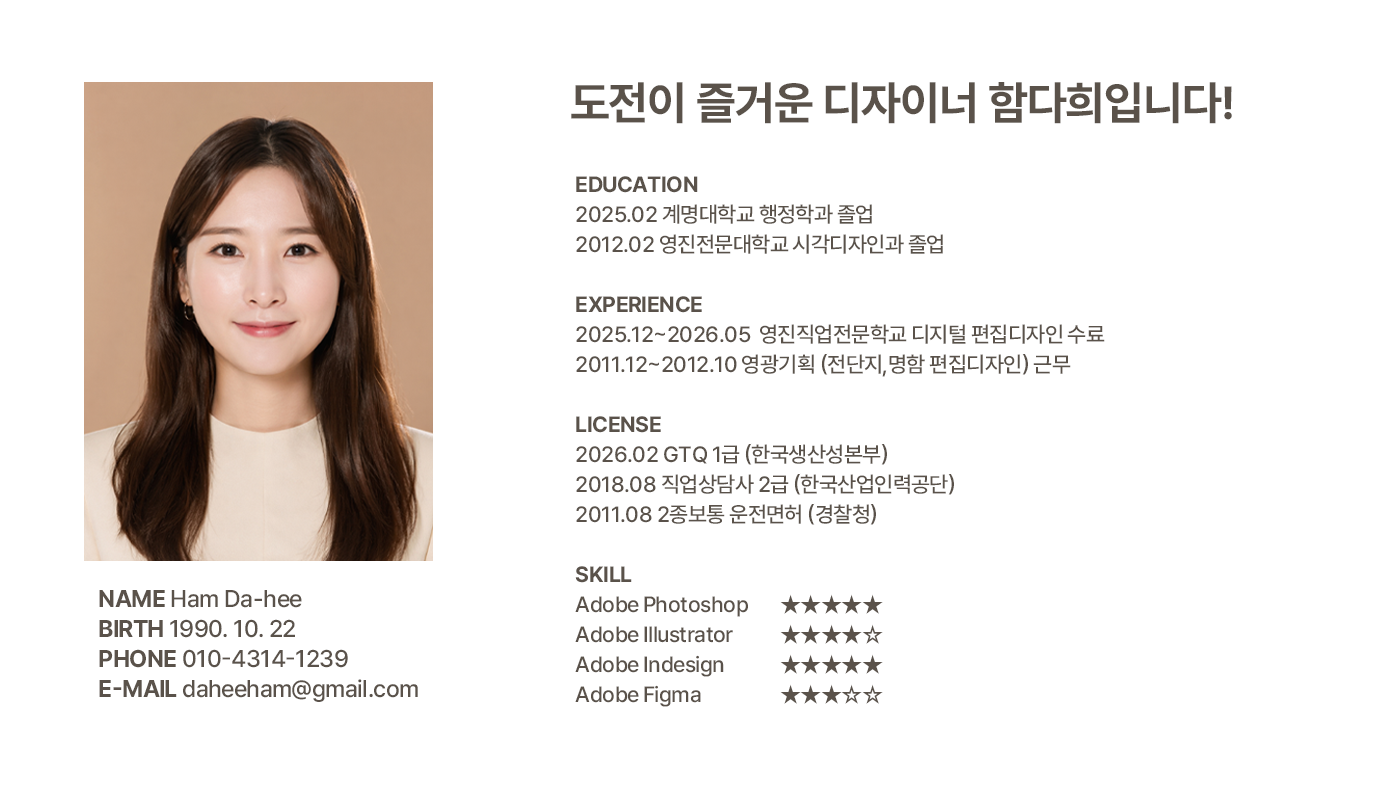
<style>
.page{position:relative;width:1400px;height:788px;background:#ffffff}
.page>*{position:absolute;margin:0}
.t1{font:46px "Pretendard-Bold";letter-spacing:-0.025em;color:#5a524a}
.t2{font:22px/30px "Pretendard-Medium";letter-spacing:-0.025em;color:#5a524a;text-transform:uppercase}
.t3{font:22px/30px "Pretendard-Bold";letter-spacing:-0.025em;color:#5a524a;text-transform:uppercase}
.t4{font:22px/30px "Pretendard-Medium";letter-spacing:-0.025em;color:#5a524a}
.t5{font:24px/30px "Pretendard-Medium";letter-spacing:-0.025em;color:#5a524a}
.t6{font:24px/30px "Pretendard-Bold";letter-spacing:-0.025em;color:#5a524a}
</style>
<div class="page">
<p class="t1" style="left:571px;top:82px;width:661px;height:42px">도전이 즐거운 디자이너 함다희입니다!</p>
<p class="t2" style="left:575px;top:176px;width:530px;height:531px"><span class="t3">education<br></span>2025.02 계명대학교 행정학과 졸업<br>2012.02 영진전문대학교 시각디자인과 졸업<br><br><span class="t3">experience<br></span>2025.12~2026.05  영진직업전문학교 디지털 편집디자인 수료 <br>2011.12~2012.10 영광기획 (전단지,명함 편집디자인) 근무<br><br><span class="t3">LICENSE<br></span>2026.02 gtq 1급 (한국생산성본부)<br>2018.08 직업상담사 2급 (한국산업인력공단)<br>2011.08 2종보통 운전면허 (경찰청)<br><br><span class="t3">skill<br></span>A<span class="t4">dobe Photoshop<br></span>A<span class="t4">dobe Illustrator<br></span>A<span class="t4">dobe Indesign<br></span>A<span class="t4">dobe Figma</span></p>
<p class="t5" style="left:99px;top:590px;width:319px;height:112px"><span class="t6">NAME</span> Ham Da-hee<br><span class="t6">BIRTH</span> 1990. 10. 22<br><span class="t6">PHONE</span> 010-4314-1239<br><span class="t6">E-MAIL</span> daheeham@gmail.com</p>
<p class="t2" style="left:780px;top:594px;width:103px;height:110px">★★★★★<br>★★★★☆<br>★★★★★<br>★★★☆☆</p>
</div>
